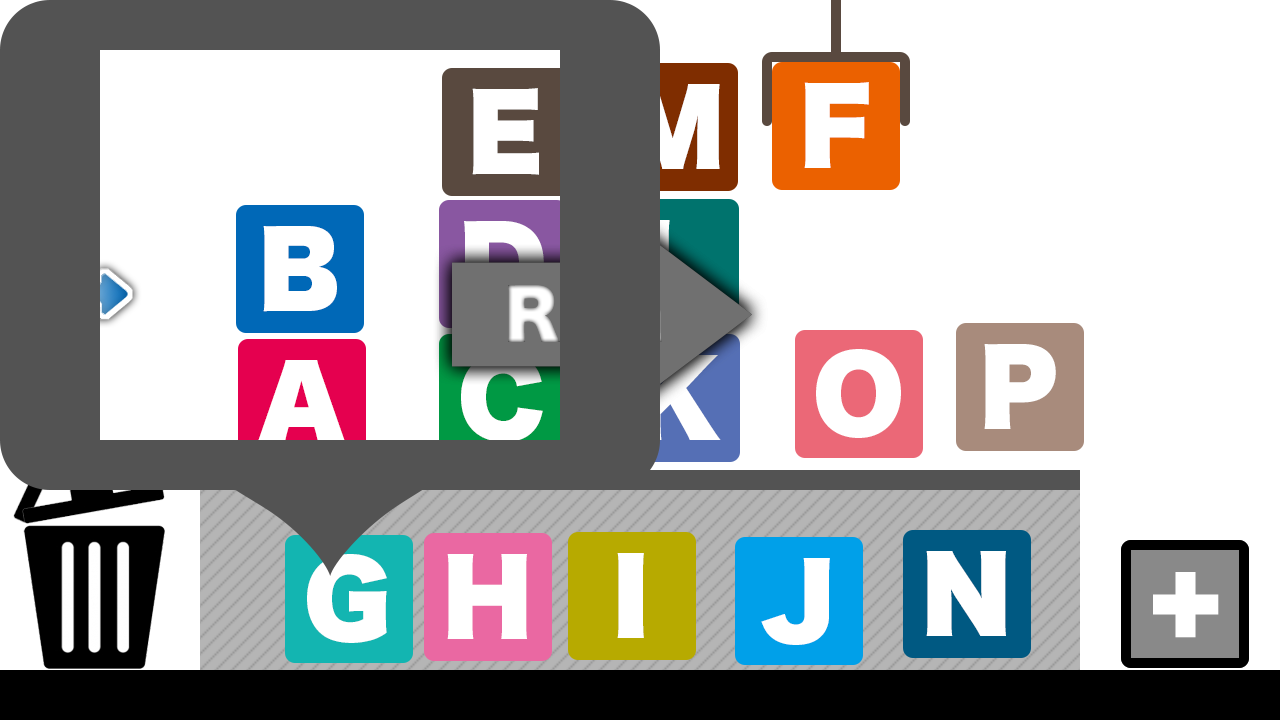
<style>
.page{position:relative;width:1280px;height:720px;background:#ffffff}
.page>*{position:absolute;margin:0}
.t1{font:100px "HiraginoSans-W9";color:#ffffff}
.t2{font:100px "HiraginoSans-W9"}
.t3{font:66.7px "HiraginoSans-W9"}
</style>
<div class="page">
<p class="t1" style="left:472px;top:88px;width:67px;height:87px">E</p>
<p class="t1" style="left:625px;top:84px;width:95px;height:85px">M</p>
<p class="t1" style="left:804px;top:82px;width:65px;height:86px">F</p>
<p class="t2" style="left:464px;top:221px;width:80px;height:86px">D</p>
<p class="t2" style="left:643px;top:220px;width:66px;height:86px">L</p>
<p class="t1" style="left:263px;top:226px;width:74px;height:86px">B</p>
<p class="t3" style="left:508px;top:285px;width:154px;height:59px">Run</p>
<p class="t3" style="left:508px;top:285px;width:154px;height:59px">Run</p>
<p class="t1" style="left:461px;top:353px;width:82px;height:89px">C</p>
<p class="t1" style="left:816px;top:349px;width:85px;height:89px">O</p>
<p class="t1" style="left:984px;top:344px;width:72px;height:85px">P</p>
<p class="t1" style="left:256px;top:360px;width:91px;height:85px">A</p>
<p class="t2" style="left:635px;top:355px;width:86px;height:85px">K</p>
<p class="t1" style="left:307px;top:554px;width:80px;height:89px">G</p>
<p class="t1" style="left:447px;top:554px;width:80px;height:85px">H</p>
<p class="t1" style="left:617px;top:553px;width:27px;height:85px">I</p>
<p class="t1" style="left:761px;top:558px;width:69px;height:87px">J</p>
<p class="t1" style="left:926px;top:551px;width:80px;height:85px">N</p>
<p class="t1" style="left:1153px;top:572px;width:66px;height:66px">+</p>
<p class="t1" style="left:1153px;top:572px;width:66px;height:66px">+</p>
</div>
